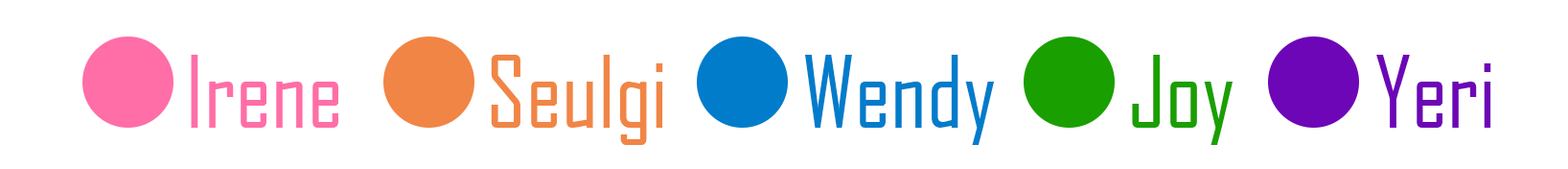
<style>
.page{position:relative;width:1568px;height:169px;background:#ffffff}
.page>*{position:absolute;margin:0}
.t1{font:95.9px "AgencyFB-Reg";color:#ff6ea7}
.t2{font:95.9px "AgencyFB-Reg";color:#f18545}
.t3{font:95.9px "AgencyFB-Reg";color:#007ccb}
.t4{font:95.9px "AgencyFB-Reg";color:#1a9f00}
.t5{font:95.9px "AgencyFB-Reg";color:#6d06b6}
</style>
<div class="page">
<p class="t1" style="left:191px;top:55px;width:147px;height:72px">Irene</p>
<p class="t2" style="left:491px;top:55px;width:172px;height:90px">Seulgi</p>
<p class="t3" style="left:805px;top:55px;width:190px;height:90px">Wendy</p>
<p class="t4" style="left:1132px;top:55px;width:102px;height:90px">Joy</p>
<p class="t5" style="left:1376px;top:55px;width:115px;height:72px">Yeri</p>
</div>
